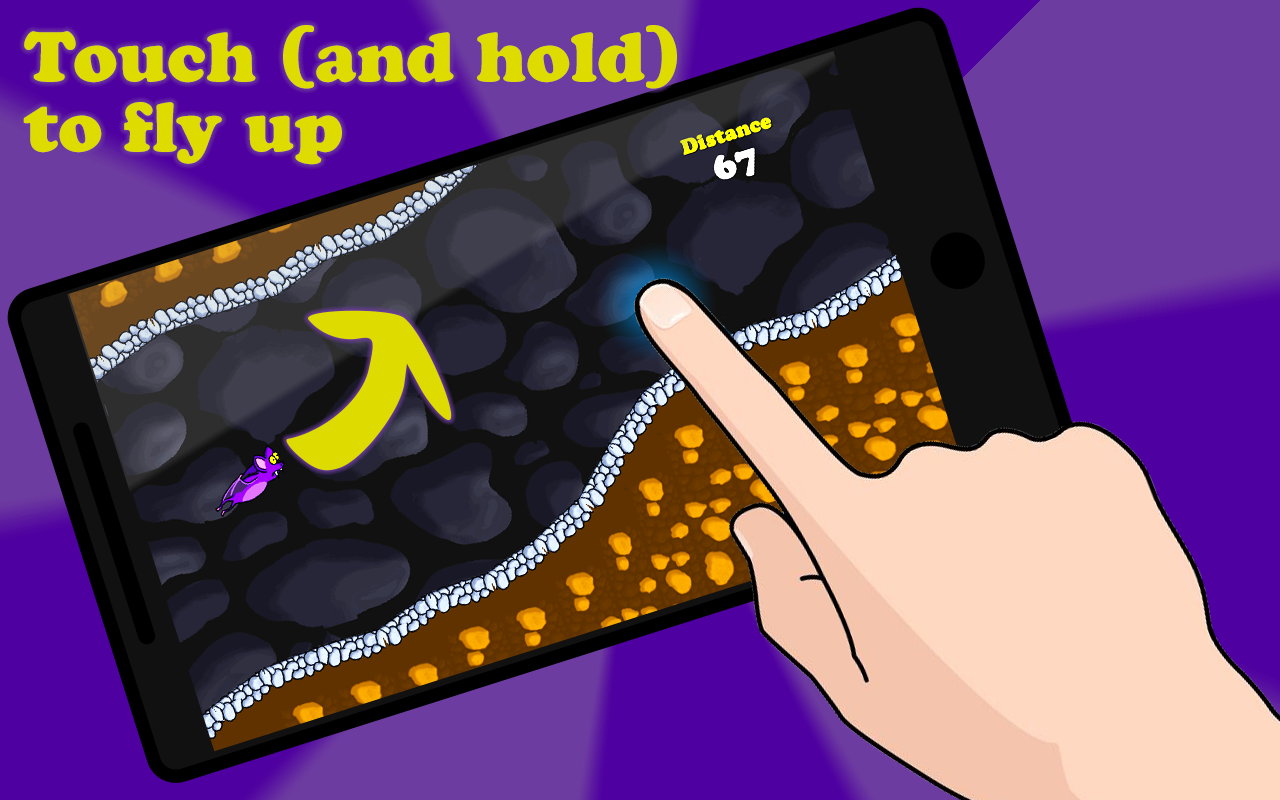
<style>
.page{position:relative;width:1280px;height:800px}
.page>*{position:absolute;margin:0}
.t1{font:70px/70px "CooperBlackStd";color:#dedb00}
</style>
<div class="page">
<p class="t1" style="left:23px;top:25px;width:654px;height:140px">Touch (and hold) <br>to fly up</p>
</div>
